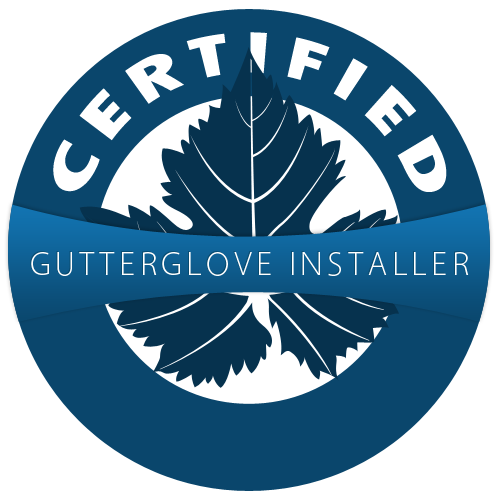
<style>
.page{position:relative;width:500px;height:500px;background:#ffffff}
.page>*{position:absolute;margin:0}
.t1{font:62.2px "TwCenMT-CondensedExtraBold";letter-spacing:0.13em;color:#ffffff}
.t2{font:33.3px "Vegur-Light";letter-spacing:0.13em}
.t3{font:33.3px "Vegur-Light";letter-spacing:0.13em;color:#ffffff}
</style>
<div class="page">
<p class="t1" style="left:53px;top:32px;width:394px;height:160px;rotate:3deg">CERTIFIED</p>
<p class="t2" style="left:30px;top:251px;width:438px;height:24px">GUTTERGLOVE INSTALLER</p>
<p class="t3" style="left:31px;top:252px;width:438px;height:24px">GUTTERGLOVE INSTALLER</p>
</div>
